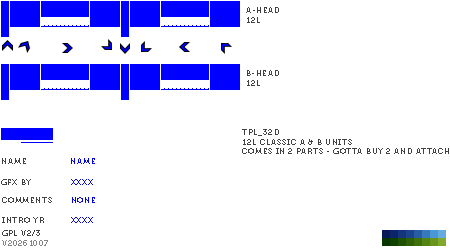
<style>
.page{position:relative;width:450px;height:250px;background:#ffffff}
.page>*{position:absolute;margin:0}
.t1{font:8px "Museo700-Regular";letter-spacing:0.075em;color:#404040;text-transform:uppercase}
.t2{font:8px "Museo700-Regular";letter-spacing:0.075em;color:#0000ff;text-transform:uppercase}
.t3{font:8px "Museo700-Regular";letter-spacing:0.075em;color:#848484;text-transform:uppercase}
</style>
<div class="page">
<p class="t1" style="left:246px;top:7px;width:33px;height:16px">a-head<br>12l</p>
<p class="t1" style="left:247px;top:70px;width:32px;height:16px">b-head<br>12l</p>
<p class="t1" style="left:242px;top:129px;width:207px;height:25px">tpl_32d<br>12L Classic A &amp; B Units<br>comes in 2 parts - gotta buy 2 and attach</p>
<p class="t1" style="left:2px;top:158px;width:24px;height:6px">name</p>
<p class="t2" style="left:71px;top:158px;width:24px;height:6px">name</p>
<p class="t1" style="left:1px;top:179px;width:30px;height:6px">gfx by</p>
<p class="t2" style="left:71px;top:179px;width:22px;height:6px">xxxx</p>
<p class="t1" style="left:2px;top:197px;width:50px;height:6px">comments</p>
<p class="t2" style="left:72px;top:197px;width:23px;height:6px">none</p>
<p class="t1" style="left:2px;top:217px;width:42px;height:6px">intro yr</p>
<p class="t2" style="left:71px;top:217px;width:22px;height:6px">xxxx</p>
<p class="t1" style="left:2px;top:230px;width:38px;height:6px">gpl v2/3</p>
<p class="t3" style="left:2px;top:240px;width:46px;height:6px">v20261007</p>
</div>
